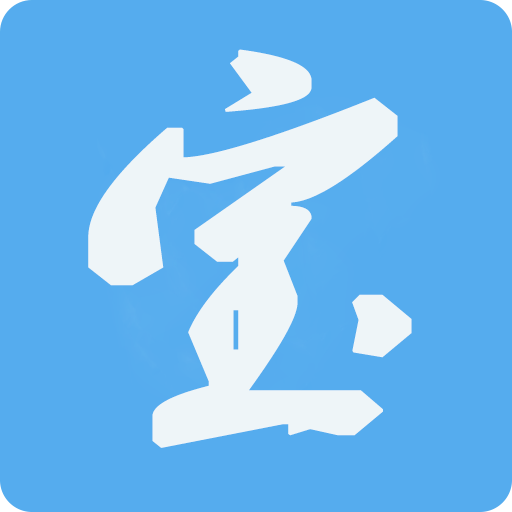
<style>
.page{position:relative;width:512px;height:512px;background:#55acee}
.page>*{position:absolute;margin:0}
.t1{font:400px "2.0-";color:#eef5f8;font-weight:bold}
</style>
<div class="page">
<p class="t1" style="left:88px;top:49px;width:324px;height:399px">宝</p>
</div>
